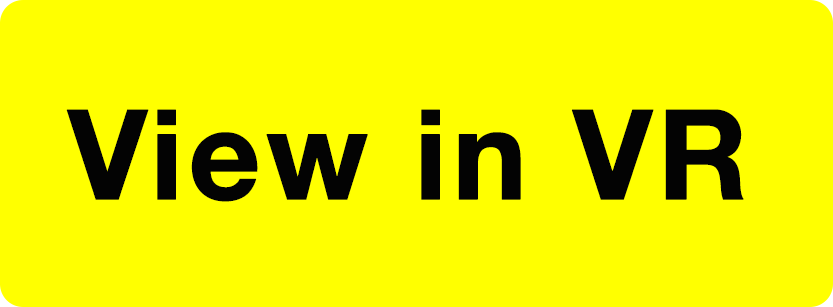
<style>
.page{position:relative;width:833px;height:307px;background:#ffff00}
.page>*{position:absolute;margin:0}
.t1{font:125px "HelveticaNeue-Bold";letter-spacing:0.02em;color:#030303;font-weight:bold}
</style>
<div class="page">
<p class="t1" style="left:66px;top:109px;width:678px;height:93px">View in VR</p>
</div>
